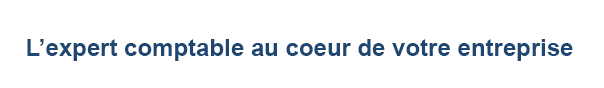
<style>
.page{position:relative;width:604px;height:88px;background:#ffffff}
.page>*{position:absolute;margin:0}
.t1{font:24px "Arial-BoldMT";color:#1e4872}
</style>
<div class="page">
<p class="t1" style="left:27px;top:39px;width:546px;height:22px">L’expert comptable au coeur de votre entreprise</p>
</div>
